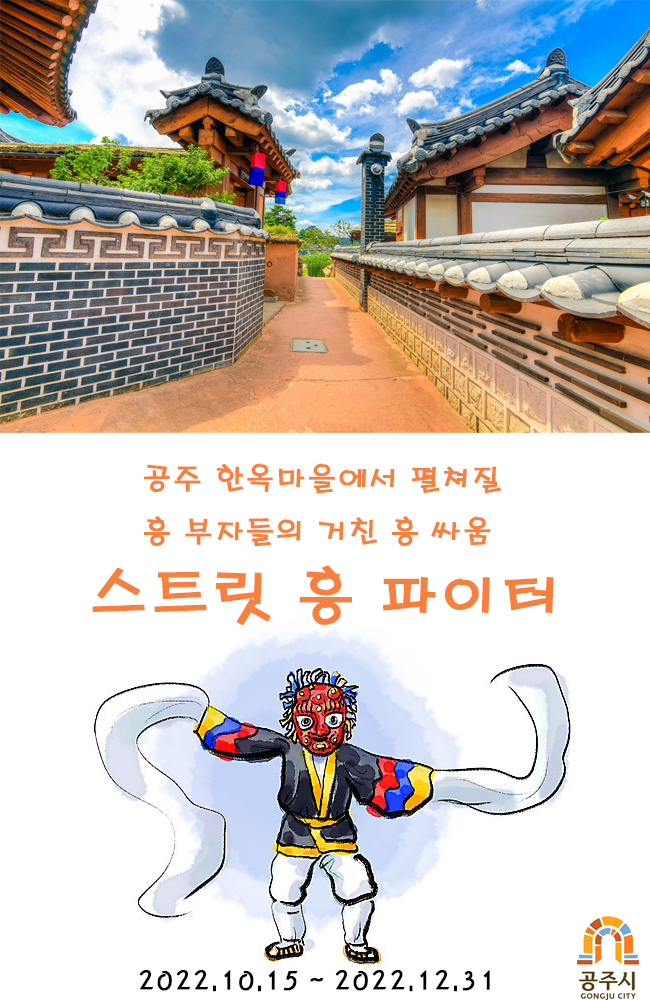
<style>
.page{position:relative;width:650px;height:1000px;background:#ffffff}
.page>*{position:absolute;margin:0}
.t1{font:30px "H2porM";color:#f8803e;font-weight:bold}
.t2{font:60px "H2porM";color:#f8803e;font-weight:bold}
.t3{font:25px "H2porM";color:#000000;font-weight:bold}
</style>
<div class="page">
<p class="t1" style="left:144px;top:463px;width:357px;height:84px">공주 한옥마을에서 펼쳐질 흥 부자들의 거친 흥 싸움</p>
<p class="t2" style="left:92px;top:565px;width:462px;height:60px">스트릿 흥 파이터</p>
<p class="t3" style="left:139px;top:970px;width:351px;height:22px">2022.10.15 ~ 2022.12.31</p>
</div>
